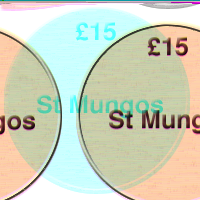
<style>
.page{position:relative;width:200px;height:200px}
.page>*{position:absolute;margin:0}
.t1{font:25px "Helvetica-Bold"}
</style>
<div class="page">
<p class="t1" style="left:75px;top:21px;width:41px;height:19px">£15</p>
<p class="t1" style="left:37px;top:93px;width:126px;height:25px">St Mungos</p>
</div>
